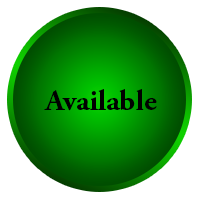
<style>
.page{position:relative;width:200px;height:200px;background:#ffffff}
.page>*{position:absolute;margin:0}
.t1{font:30px "AGaramondPro-Bold";color:#000000}
</style>
<div class="page">
<p class="t1" style="left:44px;top:89px;width:113px;height:22px">Available</p>
</div>
